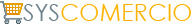
<style>
.page{position:relative;width:192px;height:24px;background:#ffffff}
.page>*{position:absolute;margin:0}
.t1{font:23.4px "CenturyGothic";color:#ffb300}
.t2{font:23.4px "CenturyGothic";color:#6d818c}
</style>
<div class="page">
<p class="t1" style="left:23px;top:4px;width:168px;height:17px"><span class="t2">SYS</span>COMERCIO</p>
</div>
